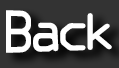
<style>
.page{position:relative;width:119px;height:68px;background:#333333}
.page>*{position:absolute;margin:0}
.t1{font:60px "OCRAExtended";letter-spacing:-0.15em;color:#ffffff}
</style>
<div class="page">
<p class="t1" style="left:6px;top:10px;width:106px;height:43px">Back</p>
</div>
